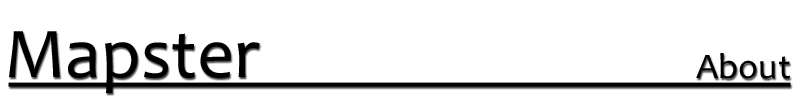
<style>
.page{position:relative;width:800px;height:100px;background:#ffffff}
.page>*{position:absolute;margin:0}
.t1{font:72px "Candara";color:#000000}
.t2{font:36px "Candara";color:#000000}
</style>
<div class="page">
<p class="t1" style="left:9px;top:31px;width:251px;height:62px">Mapster</p>
<p class="t2" style="left:696px;top:53px;width:94px;height:26px">About</p>
</div>
